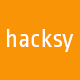
<style>
.page{position:relative;width:80px;height:80px;background:#f89406}
.page>*{position:absolute;margin:0}
.t1{font:26px "RopaSans-Regular";color:#ffffff}
</style>
<div class="page">
<p class="t1" style="left:7px;top:29px;width:67px;height:23px">hacksy</p>
</div>
